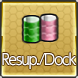
<style>
.page{position:relative;width:78px;height:78px}
.page>*{position:absolute;margin:0}
.t1{font:15px "UDShinGoPro-Regular";letter-spacing:-0.08em;color:#ffffff;scale:0.9 1}
</style>
<div class="page">
<p class="t1" style="left:2px;top:52px;width:75px;height:17px">Resup./Dock</p>
</div>
